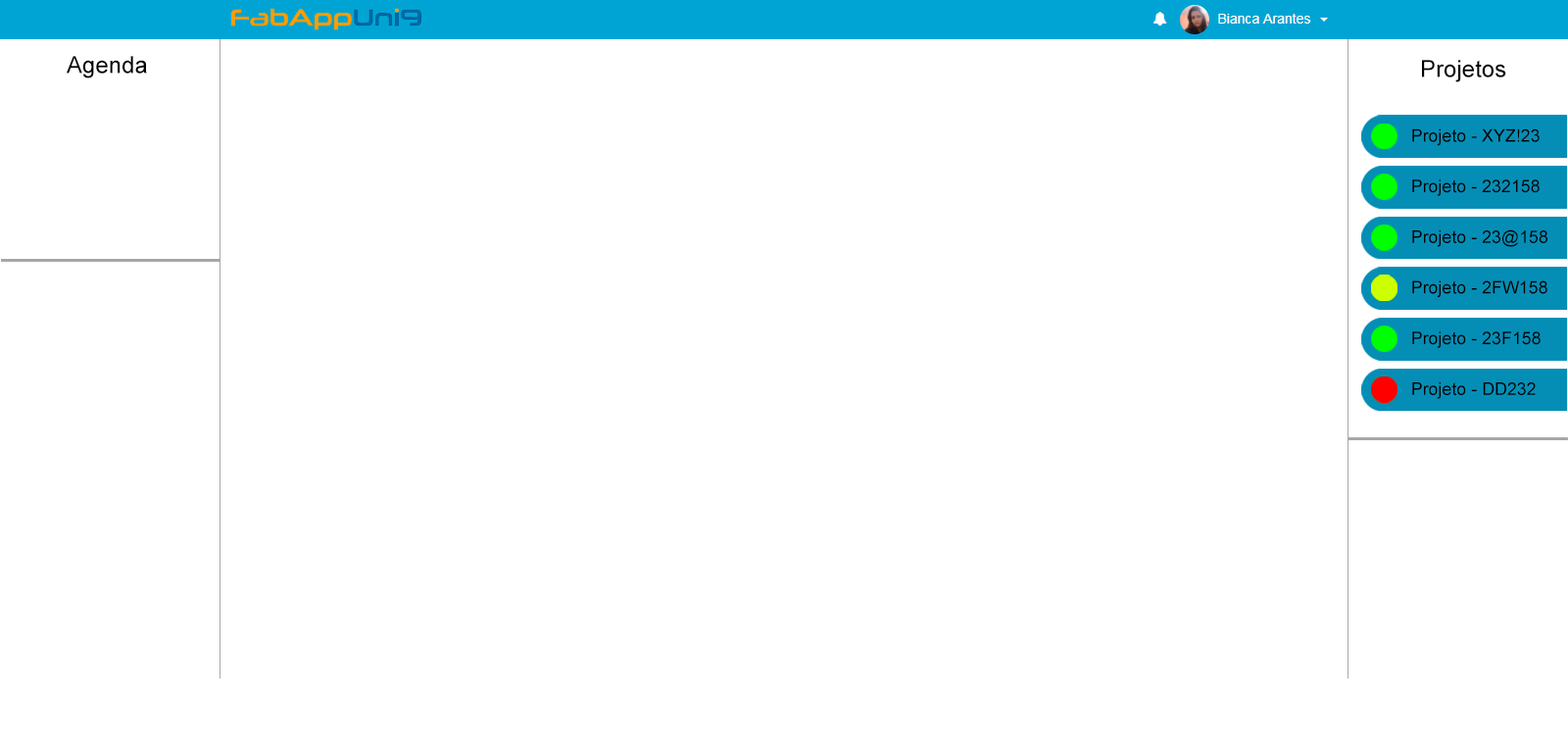
<style>
.page{position:relative;width:1568px;height:754px;background:#ffffff}
.page>*{position:absolute;margin:0}
.t1{font:23.5px "ArialMT";color:#000000}
.t2{font:17.5px "ArialMT";color:#000000}
</style>
<div class="page">
<p class="t1" style="left:67px;top:56px;width:80px;height:22px">Agenda</p>
<p class="t1" style="left:1422px;top:60px;width:84px;height:22px">Projetos</p>
<p class="t2" style="left:1412px;top:128px;width:128px;height:18px">Projeto - XYZ!23</p>
<p class="t2" style="left:1412px;top:179px;width:128px;height:17px">Projeto - 232158</p>
<p class="t2" style="left:1412px;top:229px;width:135px;height:18px">Projeto - 23@158</p>
<p class="t2" style="left:1412px;top:280px;width:135px;height:17px">Projeto - 2FW158</p>
<p class="t2" style="left:1412px;top:331px;width:129px;height:17px">Projeto - 23F158</p>
<p class="t2" style="left:1412px;top:382px;width:124px;height:17px">Projeto - DD232</p>
</div>
